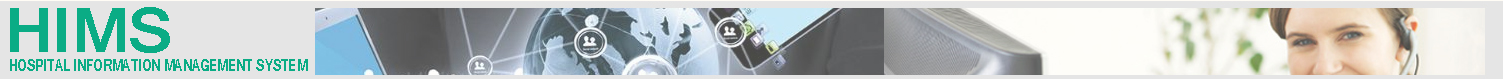
<style>
.page{position:relative;width:1503px;height:79px;background:#e5e5e5}
.page>*{position:absolute;margin:0}
.t1{font:67.3px "Gautami-Bold";color:#0aac85;scale:1.05 1}
.t2{font:18.1px "Gautami-Bold";color:#0aac85;scale:0.73 1}
</style>
<div class="page">
<p class="t1" style="left:10px;top:7px;width:160px;height:46px">HIMS</p>
<p class="t2" style="left:10px;top:59px;width:298px;height:12px">HOSPITAL INFORMATION MANAGEMENT SYSTEM</p>
</div>
